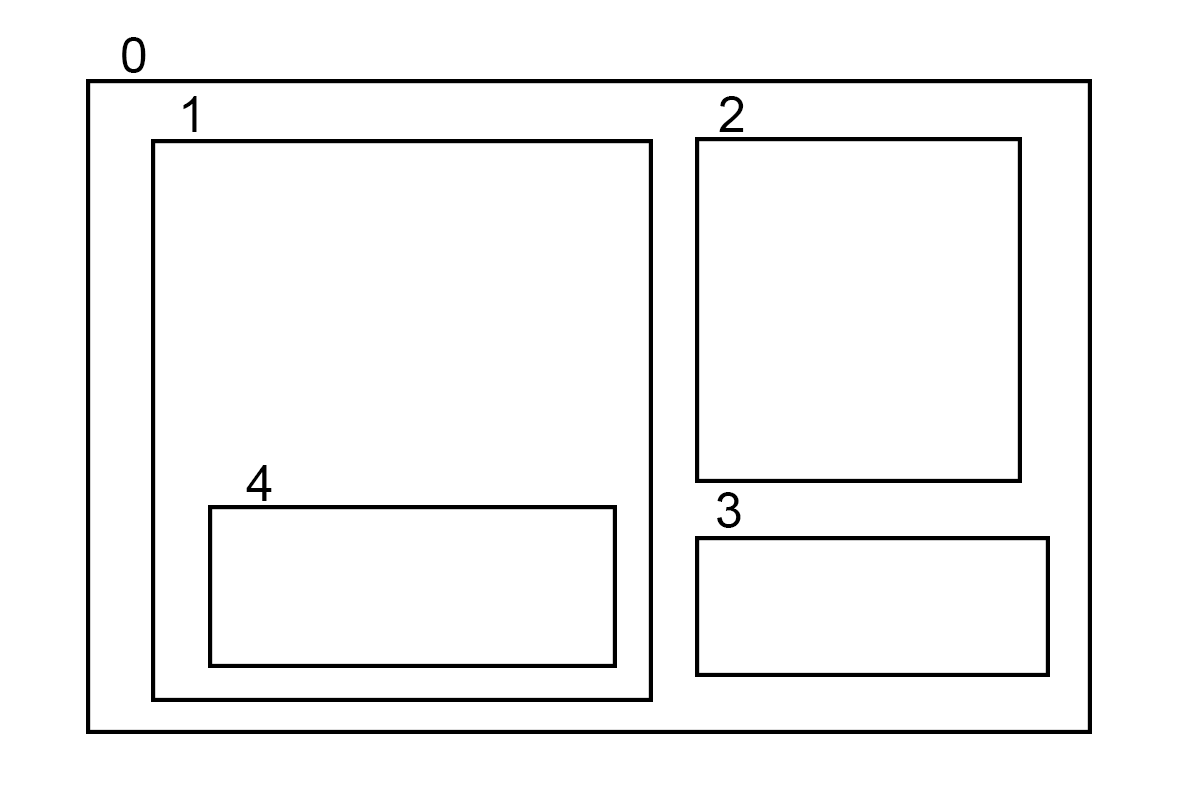
<style>
.page{position:relative;width:1180px;height:796px;background:#ffffff}
.page>*{position:absolute;margin:0}
.t1{font:12px "ArialMT";color:#000000}
</style>
<div class="page">
<p class="t1" style="left:122px;top:37px;width:24px;height:36px">0</p>
<p class="t1" style="left:183px;top:96px;width:14px;height:36px">1</p>
<p class="t1" style="left:719px;top:96px;width:25px;height:36px">2</p>
<p class="t1" style="left:246px;top:465px;width:26px;height:36px">4</p>
<p class="t1" style="left:717px;top:492px;width:24px;height:36px">3</p>
</div>
